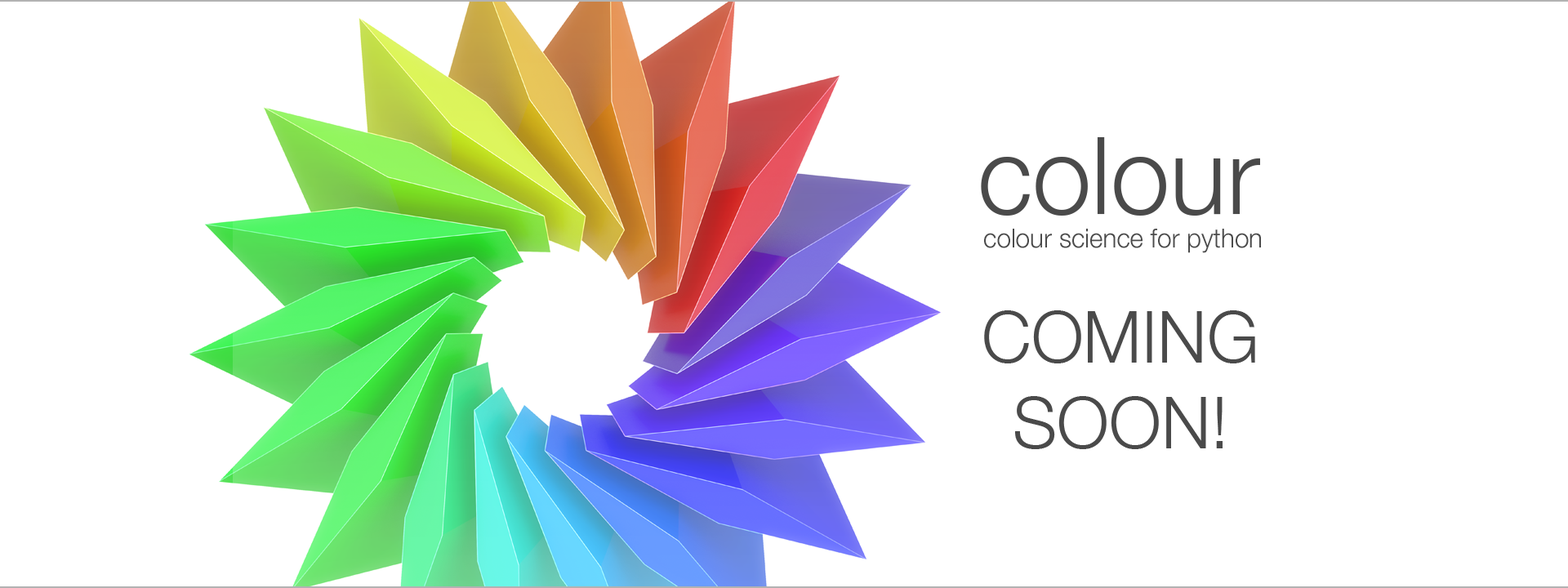
<style>
.page{position:relative;width:1568px;height:588px;background:#ffffff}
.page>*{position:absolute;margin:0}
.t1{font:106.8px "HelveticaNeue-Light";color:#4a4a4a}
.t2{font:26.3px "HelveticaNeue-Light";color:#4a4a4a}
.t3{font:71.6px "HelveticaNeue-Light";color:#4a4a4a}
</style>
<div class="page">
<p class="t1" style="left:981px;top:137px;width:279px;height:79px">colour</p>
<p class="t2" style="left:984px;top:229px;width:277px;height:24px">colour science for python</p>
<p class="t3" style="left:984px;top:310px;width:271px;height:139px;text-align:center">COMING<br>SOON!</p>
</div>
